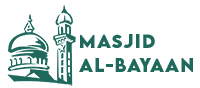
<style>
.page{position:relative;width:200px;height:88px;background:#ffffff}
.page>*{position:absolute;margin:0}
.t1{font:16.8px/23.7px "LEMONMILK-Bold";letter-spacing:0.06em;color:#1e695c}
</style>
<div class="page">
<p class="t1" style="left:79px;top:34px;width:114px;height:38px">Masjid<br>Al-Bayaan</p>
</div>
